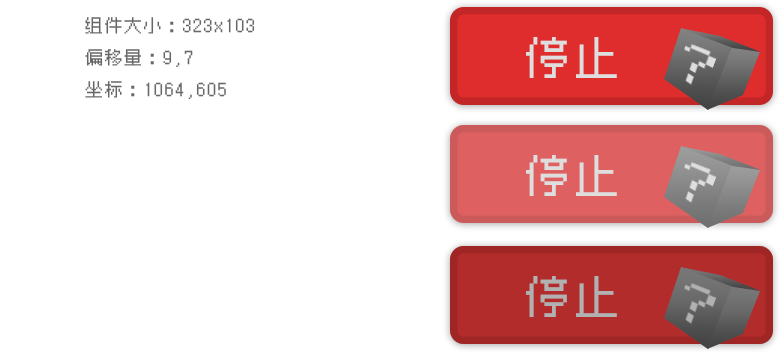
<style>
.page{position:relative;width:782px;height:354px;background:#ffffff}
.page>*{position:absolute;margin:0}
.t1{font:17.7px/31.8px "Zpix";color:#676767}
.t2{font:44.8px "Zpix";color:#dedede}
.t3{font:44.8px "Zpix";color:#b1b1b1}
</style>
<div class="page">
<p class="t1" style="left:85px;top:17px;width:170px;height:83px">组件大小：323x103<br>偏移量：9,7<br>坐标：1064,605</p>
<p class="t2" style="left:526px;top:37px;width:91px;height:41px">停止</p>
<p class="t2" style="left:526px;top:155px;width:91px;height:41px">停止</p>
<p class="t3" style="left:526px;top:276px;width:91px;height:41px">停止</p>
</div>
